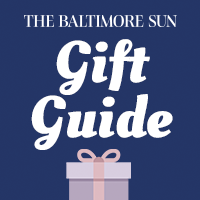
<style>
.page{position:relative;width:200px;height:200px;background:#243566}
.page>*{position:absolute;margin:0}
.t1{font:58.4px/55.3px "OleoScript-Bold";color:#ffffff}
</style>
<div class="page">
<p class="t1" style="left:31px;top:39px;width:142px;height:111px;text-align:center">Gift<br>Guide</p>
</div>
